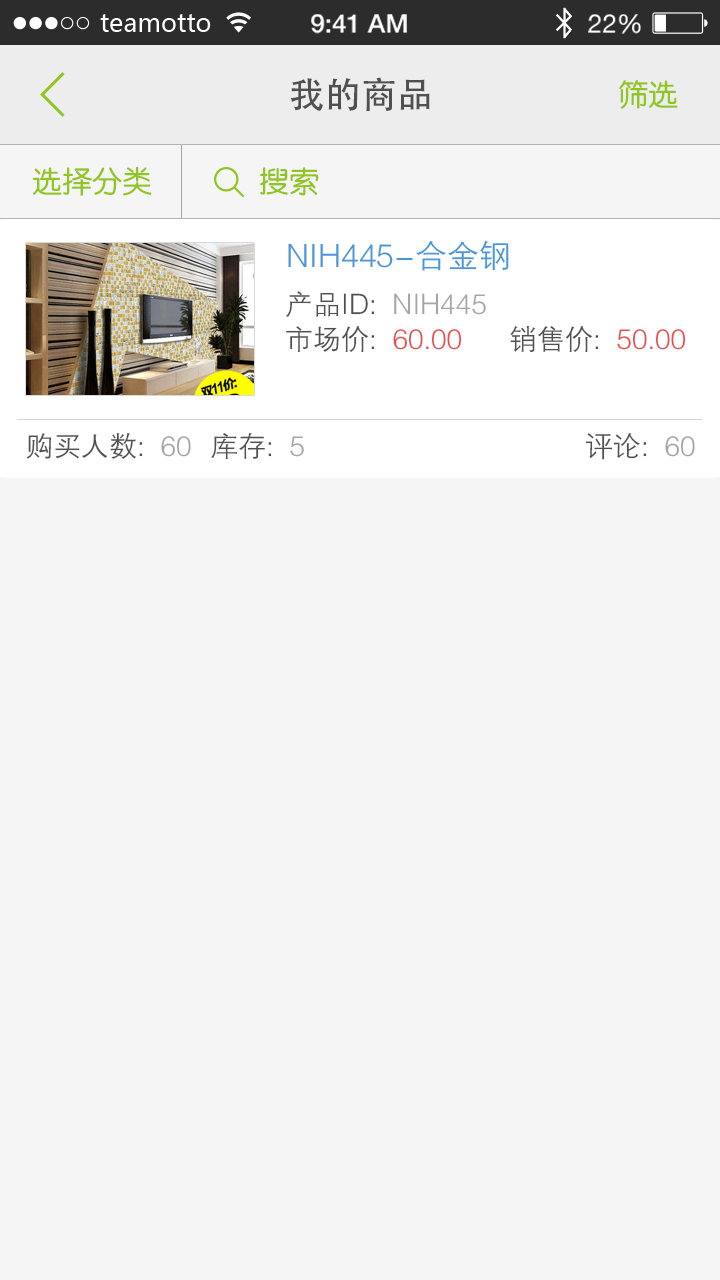
<style>
.page{position:relative;width:720px;height:1280px;background:#f5f5f5}
.page>*{position:absolute;margin:0}
.t1{font:36px "AdobeHeitiStd-Regular";color:#505050}
.t2{font:30px "FZY3JW--GB1-0";color:#91c521}
.t3{font:32px "FZZDXJW--GB1-0";color:#4997d9}
.t4{font:28px "FZZDXJW--GB1-0";color:#a6a6a6}
.t5{font:28px "FZZDXJW--GB1-0";color:#505050}
.t6{font:28px "FZZDXJW--GB1-0";color:#e54f4f}
</style>
<div class="page">
<p class="t1" style="left:290px;top:77px;width:140px;height:34px">我的商品</p>
<p class="t2" style="left:619px;top:80px;width:59px;height:29px">筛选</p>
<p class="t2" style="left:32px;top:166px;width:120px;height:30px">选择分类</p>
<p class="t2" style="left:260px;top:167px;width:59px;height:29px">搜索</p>
<p class="t3" style="left:288px;top:240px;width:221px;height:31px">NIH445-合金钢</p>
<p class="t4" style="left:286px;top:291px;width:200px;height:26px"><span class="t5">产品ID:</span>  NIH445</p>
<p class="t6" style="left:286px;top:326px;width:176px;height:27px"><span class="t5">市场价:  </span>60.00</p>
<p class="t6" style="left:510px;top:326px;width:176px;height:27px"><span class="t5">销售价:  </span>50.00</p>
<p class="t5" style="left:26px;top:433px;width:165px;height:26px">购买人数: <span class="t4"> 60</span></p>
<p class="t5" style="left:211px;top:433px;width:93px;height:27px">库存:  <span class="t4">5</span></p>
<p class="t5" style="left:585px;top:433px;width:110px;height:27px">评论: <span class="t4"> 60</span></p>
</div>
